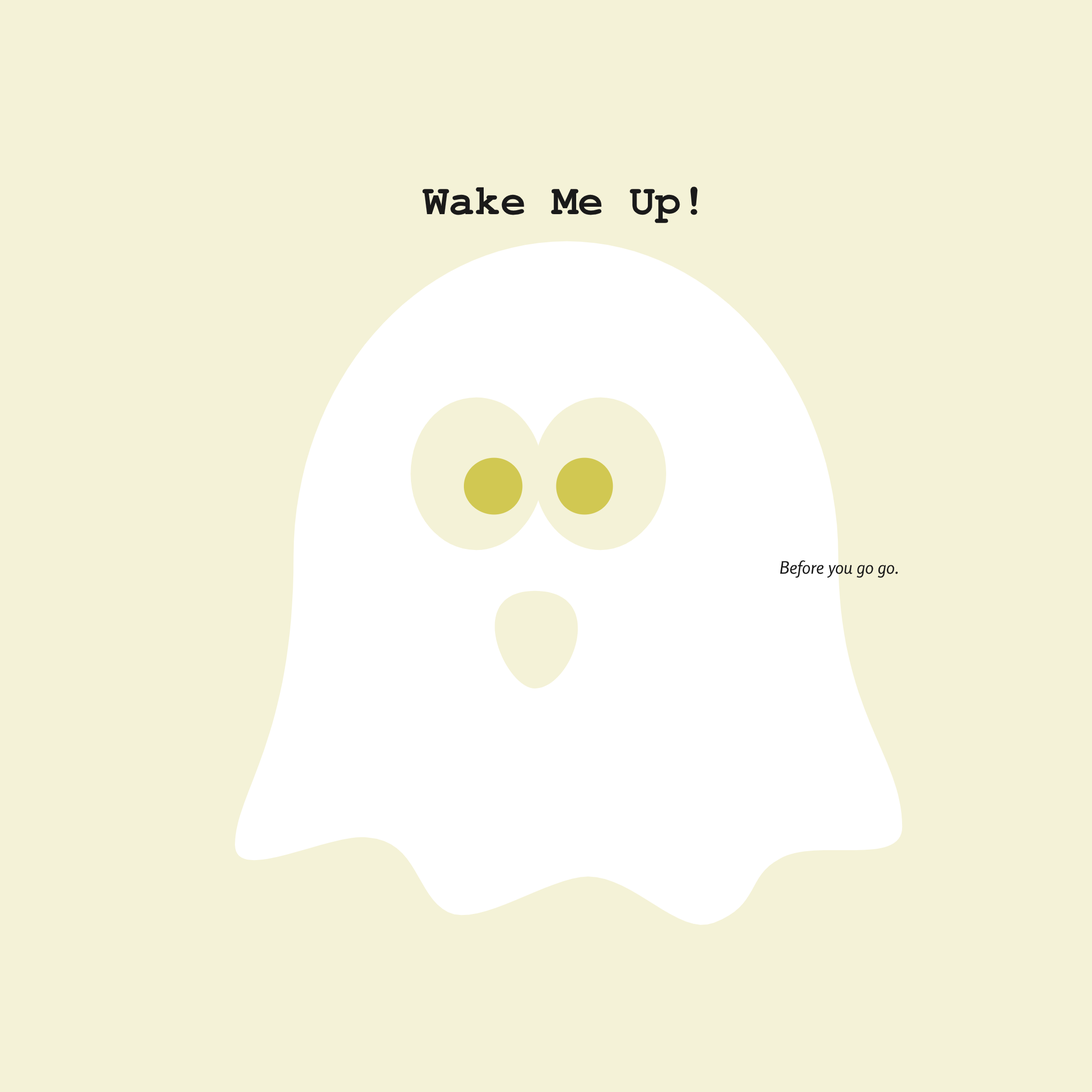
<style>
.page{position:relative;width:1092px;height:1092px;background:#f4f2d7}
.page>*{position:absolute;margin:0}
.t1{font:43px "NimbusMono-Bold";color:#1a1a1a}
.t2{font:17.3px "Rosario-Italic";color:#1a1a1a}
</style>
<div class="page">
<p class="t1" style="left:422px;top:186px;width:276px;height:37px">Wake Me Up!</p>
<p class="t2" style="left:780px;top:560px;width:118px;height:18px">Before you go go.</p>
</div>
